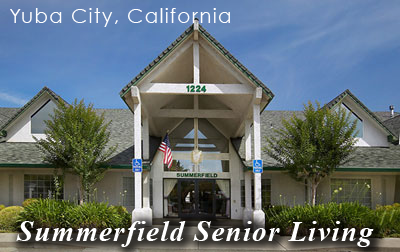
<style>
.page{position:relative;width:400px;height:252px}
.page>*{position:absolute;margin:0}
.t1{font:20.4px "CenturyGothic";letter-spacing:0.05em;color:#ffffff}
.t2{font:28.6px "TimesNewRomanPS-BoldItalicMT";letter-spacing:0.05em;color:#ffffff}
</style>
<div class="page">
<p class="t1" style="left:10px;top:8px;width:220px;height:19px">Yuba City, California</p>
<p class="t2" style="left:16px;top:221px;width:358px;height:26px">Summerfield Senior Living</p>
</div>
